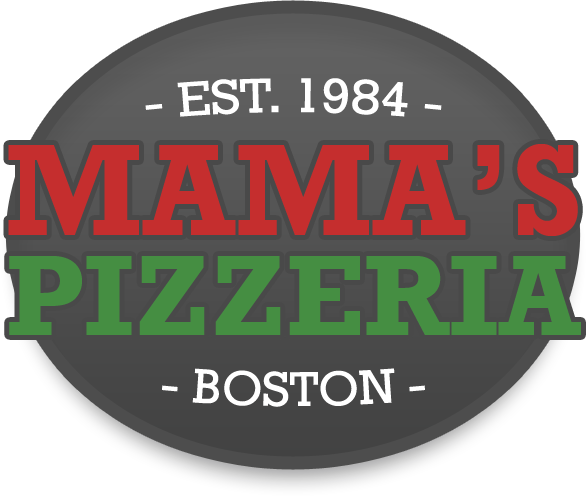
<style>
.page{position:relative;width:586px;height:496px;background:#ffffff}
.page>*{position:absolute;margin:0}
.t1{font:49.7px "Rockwell";color:#ffffff}
.t2{font:132.3px "Rockwell-Bold";color:#c52e2e}
.t3{font:117px "Rockwell-Bold";color:#458e42}
</style>
<div class="page">
<p class="t1" style="left:145px;top:78px;width:297px;height:39px">- EST. 1984 -</p>
<p class="t2" style="left:8px;top:144px;width:570px;height:92px">MAMA’S</p>
<p class="t3" style="left:9px;top:256px;width:572px;height:79px">PIZZERIA</p>
<p class="t1" style="left:162px;top:368px;width:263px;height:39px">- BOSTON -</p>
</div>
